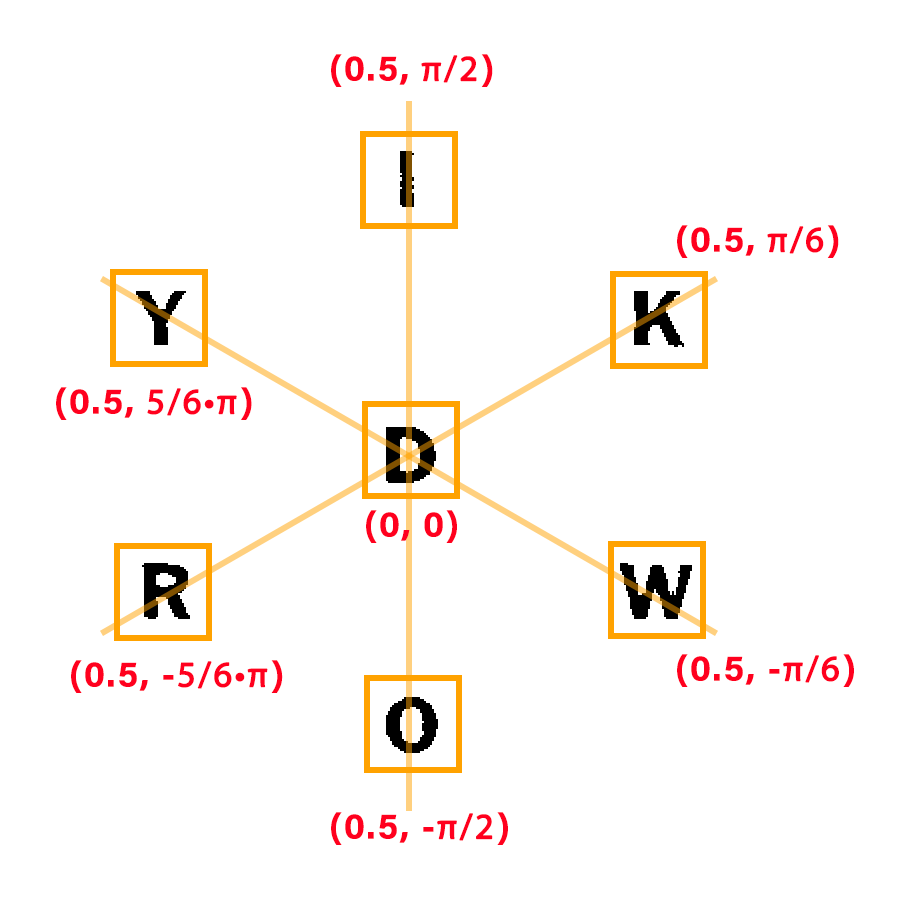
<style>
.page{position:relative;width:900px;height:900px;background:#ffffff}
.page>*{position:absolute;margin:0}
.t1{font:36px "AcuminConcept-Bold";letter-spacing:0.05em;color:#ff001e;font-weight:bold}
.t2{font:36px "MyriadPro-Regular";letter-spacing:0.05em;color:#ff001e;font-weight:bold}
</style>
<div class="page">
<p class="t1" style="left:331px;top:54px;width:162px;height:33px">(0.5, <span class="t2">π/2</span>)</p>
<p class="t1" style="left:677px;top:225px;width:162px;height:33px">(0.5, <span class="t2">π/6</span>)</p>
<p class="t1" style="left:56px;top:387px;width:196px;height:33px">(0.5, <span class="t2">5/6•π</span>)</p>
<p class="t1" style="left:366px;top:510px;width:91px;height:33px">(0, 0)</p>
<p class="t1" style="left:677px;top:654px;width:177px;height:33px">(0.5, -<span class="t2">π/6</span>)</p>
<p class="t1" style="left:71px;top:660px;width:212px;height:33px">(0.5, -<span class="t2">5/6•π</span>)</p>
<p class="t1" style="left:331px;top:812px;width:177px;height:33px">(0.5, -<span class="t2">π/2</span>)</p>
</div>
